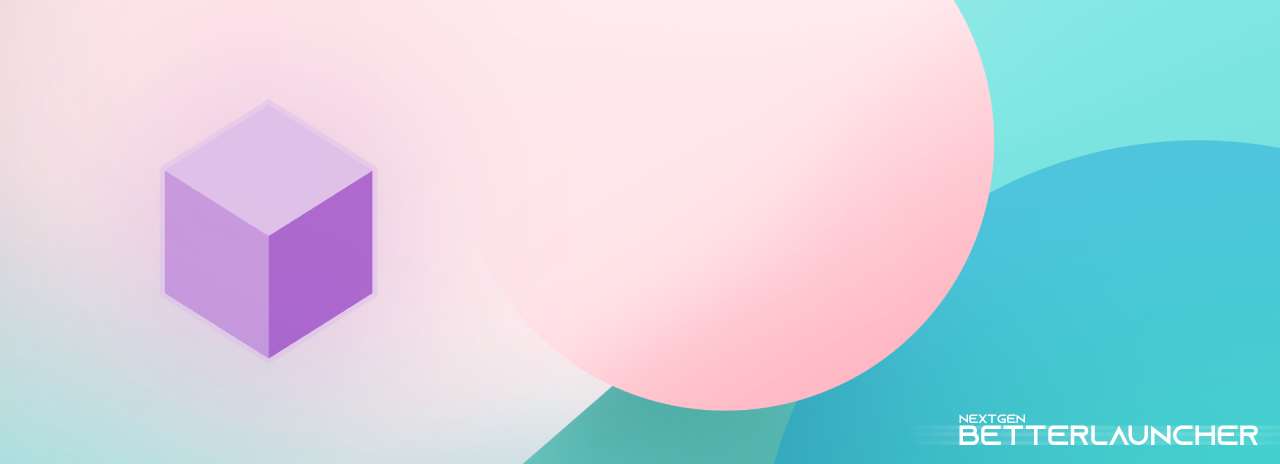
<style>
.page{position:relative;width:1280px;height:464px}
.page>*{position:absolute;margin:0}
.t1{font:12px "AzonixRegular";color:#ffffff}
.t2{font:28px "AzonixRegular";color:#ffffff}
</style>
<div class="page">
<p class="t1" style="left:959px;top:414px;width:66px;height:10px">nextgen</p>
<p class="t2" style="left:959px;top:425px;width:299px;height:21px">Betterlauncher</p>
</div>
